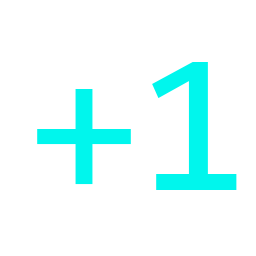
<style>
.page{position:relative;width:256px;height:256px;background:#ffffff}
.page>*{position:absolute;margin:0}
.t1{font:200px "Consolas";color:#00f6ed}
</style>
<div class="page">
<p class="t1" style="left:37px;top:62px;width:200px;height:128px">+1</p>
</div>
